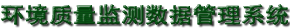
<style>
.page{position:relative;width:290px;height:28px;background:#ffffff}
.page>*{position:absolute;margin:0}
.t1{font:21px "SimHei";letter-spacing:0.1em;color:#095215;font-weight:bold;scale:1.09 1}
</style>
<div class="page">
<p class="t1" style="left:1px;top:4px;width:287px;height:21px">环境质量监测数据管理系统</p>
<p class="t1" style="left:1px;top:4px;width:287px;height:21px">环境质量监测数据管理系统</p>
</div>
